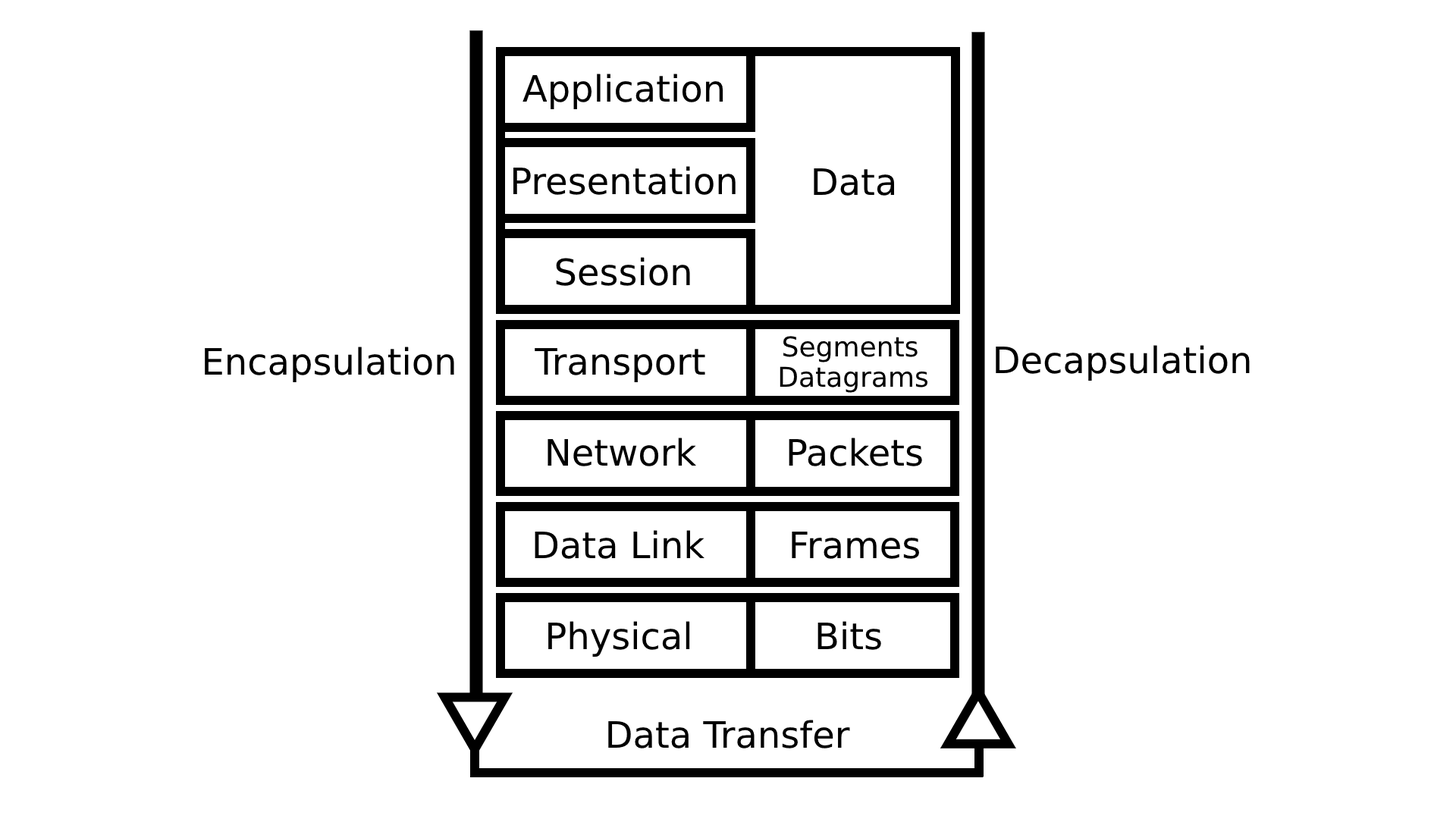
<style>
.page{position:relative;width:1456px;height:819px;background:#ffffff}
.page>*{position:absolute;margin:0}
.t1{font:36.4px "DejaVuSans";color:#000000}
.t2{font:27.3px "DejaVuSans";color:#000000}
</style>
<div class="page">
<p class="t1" style="left:522px;top:74px;width:201px;height:35px">Application</p>
<p class="t1" style="left:513px;top:166px;width:223px;height:29px">Presentation</p>
<p class="t1" style="left:814px;top:168px;width:80px;height:28px">Data</p>
<p class="t1" style="left:556px;top:257px;width:134px;height:29px">Session</p>
<p class="t2" style="left:783px;top:336px;width:135px;height:26px">Segments</p>
<p class="t1" style="left:205px;top:347px;width:249px;height:35px">Encapsulation</p>
<p class="t1" style="left:535px;top:348px;width:170px;height:34px">Transport</p>
<p class="t1" style="left:996px;top:345px;width:254px;height:36px">Decapsulation</p>
<p class="t2" style="left:780px;top:366px;width:147px;height:27px">Datagrams</p>
<p class="t1" style="left:548px;top:438px;width:149px;height:28px">Network</p>
<p class="t1" style="left:789px;top:438px;width:133px;height:28px">Packets</p>
<p class="t1" style="left:535px;top:530px;width:169px;height:29px">Data Link</p>
<p class="t1" style="left:792px;top:532px;width:127px;height:27px">Frames</p>
<p class="t1" style="left:548px;top:621px;width:142px;height:36px">Physical</p>
<p class="t1" style="left:817px;top:621px;width:64px;height:29px">Bits</p>
<p class="t1" style="left:608px;top:720px;width:242px;height:28px">Data Transfer</p>
</div>
